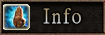
<style>
.page{position:relative;width:105px;height:35px}
.page>*{position:absolute;margin:0}
.t1{font:20px "Ming-Lt-HKSCS-ExtB"}
</style>
<div class="page">
<p class="t1" style="left:43px;top:8px;width:38px;height:16px">Info</p>
</div>
